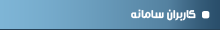
<style>
.page{position:relative;width:220px;height:30px}
.page>*{position:absolute;margin:0}
.t1{font:12px "Mj_Flow-Bold";color:#e7e7e7}
</style>
<div class="page">
<p class="t1" style="left:131px;top:9px;width:65px;height:12px">کاربران سامانه</p>
</div>
